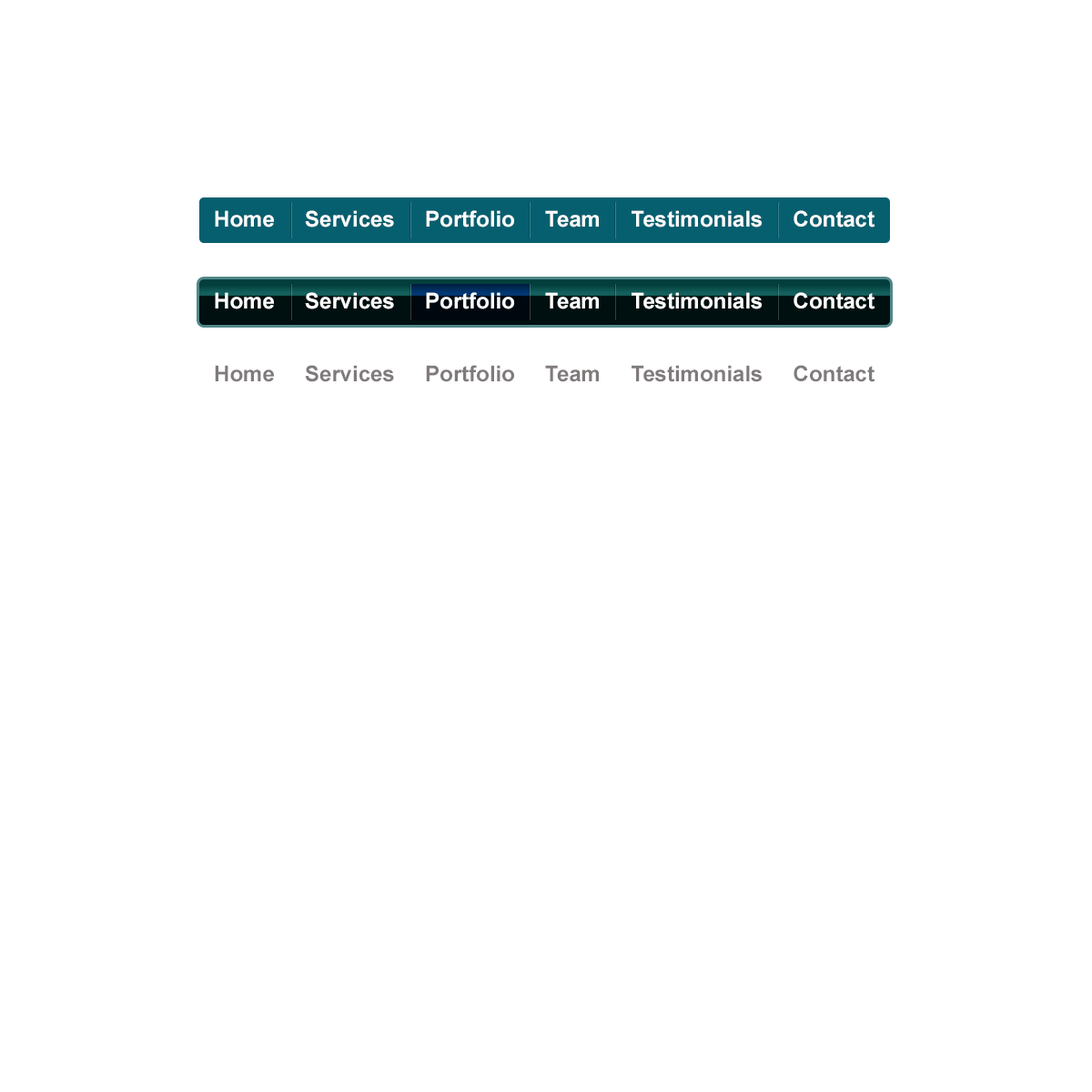
<style>
.page{position:relative;width:1092px;height:1092px;background:#ffffff}
.page>*{position:absolute;margin:0}
.t1{font:21.8px "Arial-BoldMT";color:#ffffff}
.t2{font:21.8px "Arial-BoldMT";color:#807a7a}
</style>
<div class="page">
<p class="t1" style="left:215px;top:210px;width:659px;height:17px">Home     Services     Portfolio     Team     Testimonials     Contact</p>
<p class="t1" style="left:215px;top:292px;width:659px;height:17px">Home     Services     Portfolio     Team     Testimonials     Contact</p>
<p class="t2" style="left:215px;top:365px;width:659px;height:17px">Home     Services     Portfolio     Team     Testimonials     Contact</p>
</div>
